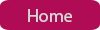
<style>
.page{position:relative;width:100px;height:30px;background:#af0c55}
.page>*{position:absolute;margin:0}
.t1{font:18px "MyriadPro-Regular";color:#d7d9d8}
</style>
<div class="page">
<p class="t1" style="left:28px;top:9px;width:44px;height:13px">Home</p>
</div>
